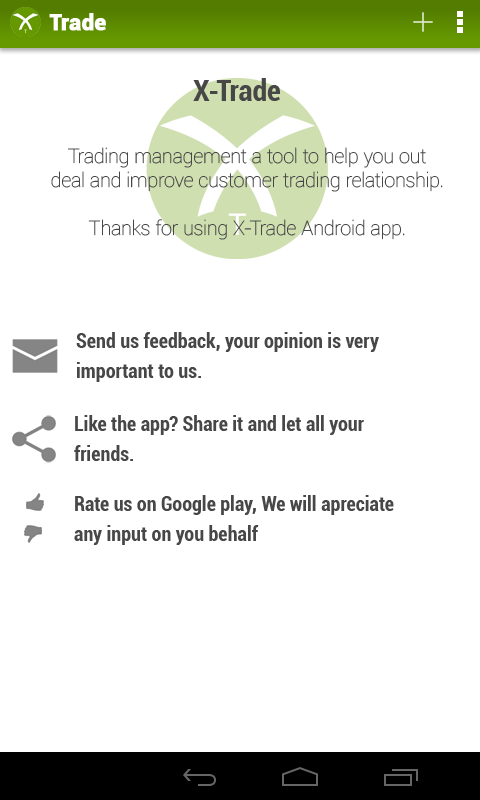
<style>
.page{position:relative;width:480px;height:800px;background:#ffffff}
.page>*{position:absolute;margin:0}
.t1{font:22px "Roboto-Black";color:#fefefe;font-weight:bold}
.t2{font:30px "Roboto-BoldCondensed";color:#474747}
.t3{font:20px/24px "Roboto-Thin";color:#474747}
.t4{font:20px/30px "Roboto-BoldCondensed";color:#474747}
</style>
<div class="page">
<p class="t1" style="left:49px;top:13px;width:57px;height:18px">Trade</p>
<p class="t2" style="left:193px;top:78px;width:87px;height:23px">X-Trade</p>
<p class="t3" style="left:51px;top:147px;width:392px;height:93px;text-align:center">Trading management a tool to help you out deal and improve customer trading relationship.<br><br>Thanks for using X-Trade Android app.</p>
<p class="t4" style="left:76px;top:332px;width:303px;height:50px">Send us feedback, your opinion is very important to us.</p>
<p class="t4" style="left:74px;top:415px;width:290px;height:46px">Like the app? Share it and let all your friends.</p>
<p class="t4" style="left:74px;top:495px;width:320px;height:50px">Rate us on Google play, We will apreciate any input on you behalf</p>
</div>
